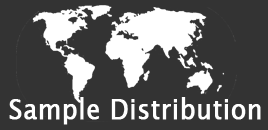
<style>
.page{position:relative;width:268px;height:130px;background:#333333}
.page>*{position:absolute;margin:0}
.t1{font:28px "LucidaSansUnicode";color:#ffffff;font-weight:bold;scale:0.9 1}
</style>
<div class="page">
<p class="t1" style="left:9px;top:97px;width:252px;height:28px">Sample Distribution</p>
</div>
